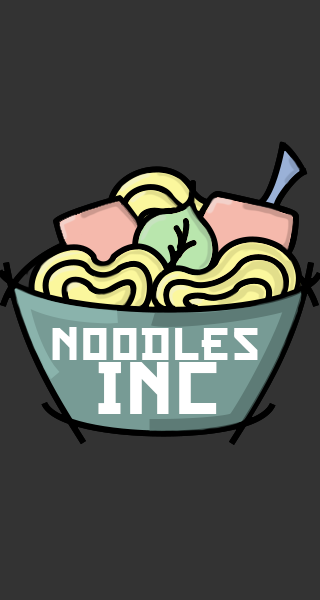
<style>
.page{position:relative;width:320px;height:600px;background:#333333}
.page>*{position:absolute;margin:0}
.t1{font:75px "CFSamuraiBob-Regular";color:#ffffff}
.t2{font:120px "CFSamuraiBob-Regular";color:#ffffff}
</style>
<div class="page">
<p class="t1" style="left:52px;top:327px;width:206px;height:33px">NOODLES</p>
<p class="t2" style="left:98px;top:362px;width:119px;height:52px">INC</p>
</div>
